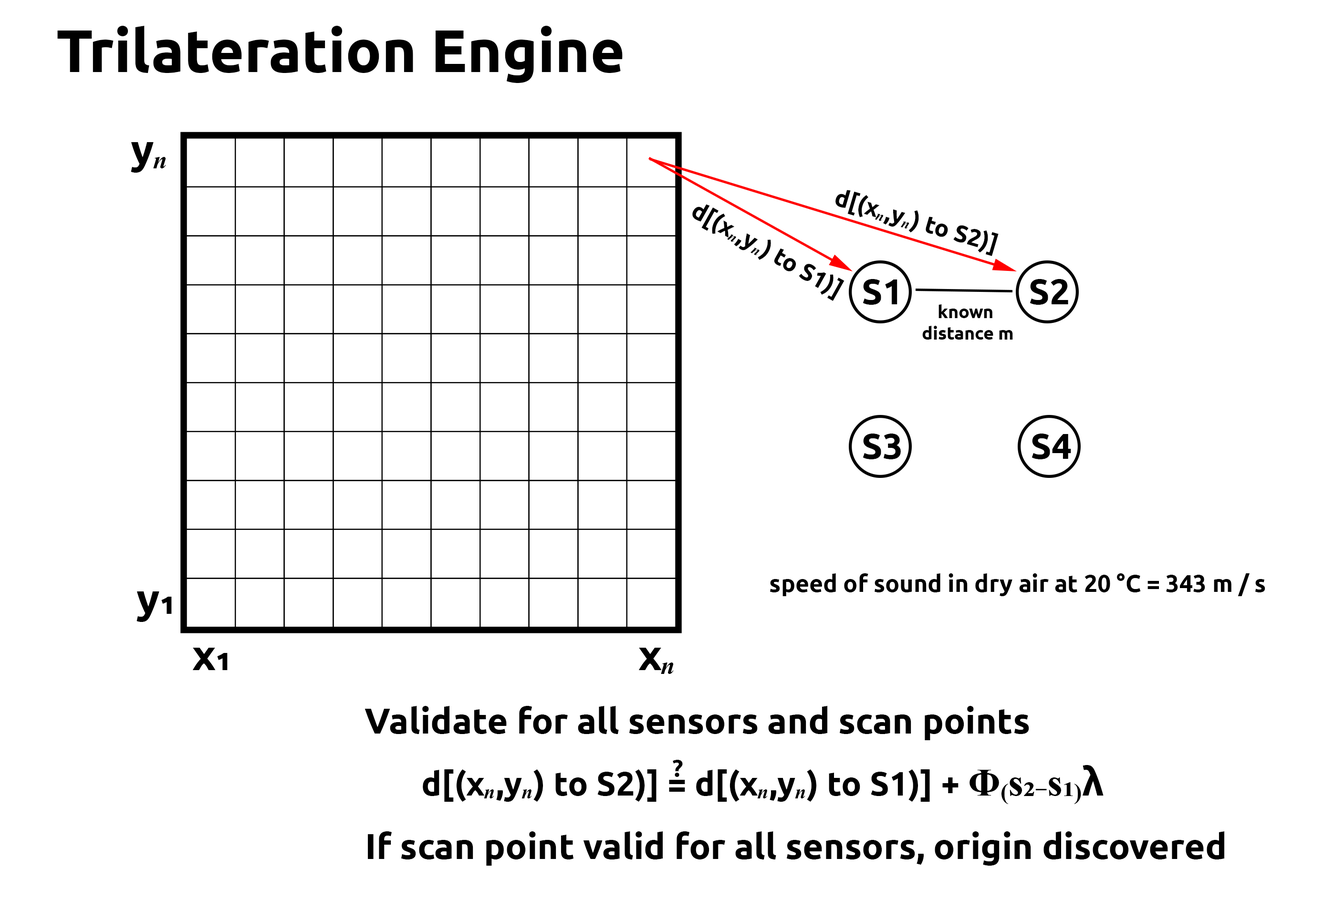
<style>
.page{position:relative;width:1324px;height:900px;background:#ffffff}
.page>*{position:absolute;margin:0}
.t1{font:59.6px "Ubuntu-Bold";color:#000000}
.t2{font:42.4px "Ubuntu-Bold";color:#000000}
.t3{font:42.4px "TimesNewRomanPS-BoldItalicMT";color:#000000}
.t4{font:23.9px "Ubuntu-Bold";color:#000000}
.t5{font:23.9px "TimesNewRomanPS-BoldItalicMT";color:#000000}
.t6{font:35.8px "Ubuntu-Bold";color:#000000}
.t7{font:17.9px "Ubuntu-Bold";color:#000000}
.t8{font:33.6px "Ubuntu-Bold";color:#000000}
.t9{font:33.6px "TimesNewRomanPS-BoldItalicMT";color:#000000}
.t10{font:39.2px "TimesNewRomanPS-BoldMT";color:#000000}
.t11{font:39.2px "Ubuntu-Bold";color:#000000}
</style>
<div class="page">
<p class="t1" style="left:57px;top:26px;width:566px;height:57px">Trilateration Engine</p>
<p class="t2" style="left:131px;top:142px;width:35px;height:31px">y<span class="t3">ₙ</span></p>
<p class="t4" style="left:836px;top:190px;width:163px;height:66px;rotate:16deg">d[(x<span class="t5">ₙ</span>,y<span class="t5">ₙ</span>) to S2)]</p>
<p class="t4" style="left:692px;top:204px;width:153px;height:97px;rotate:29deg">d[(x<span class="t5">ₙ</span>,y<span class="t5">ₙ</span>) to S1)]</p>
<p class="t6" style="left:863px;top:279px;width:35px;height:26px">S1</p>
<p class="t6" style="left:1030px;top:279px;width:38px;height:26px">S2</p>
<p class="t7" style="left:922px;top:304px;width:91px;height:36px;text-align:center">known <br>distance m</p>
<p class="t6" style="left:863px;top:434px;width:38px;height:26px">S3</p>
<p class="t6" style="left:1032px;top:434px;width:39px;height:26px">S4</p>
<p class="t4" style="left:770px;top:574px;width:496px;height:22px">speed of sound in dry air at 20 °C = 343 m / s</p>
<p class="t2" style="left:136px;top:592px;width:36px;height:30px">y₁</p>
<p class="t2" style="left:192px;top:648px;width:482px;height:26px">x₁                                        x<span class="t3">ₙ</span></p>
<p class="t6" style="left:365px;top:706px;width:664px;height:35px">Validate for all sensors and scan points</p>
<p class="t4" style="left:673px;top:760px;width:10px;height:17px">?</p>
<p class="t8" style="left:423px;top:765px;width:681px;height:40px">d[(x<span class="t9">ₙ</span>,y<span class="t9">ₙ</span>) to S2)] = d[(x<span class="t9">ₙ</span>,y<span class="t9">ₙ</span>) to S1)] + <span class="t10">Φ₍s₂₋s₁₎</span><span class="t11">λ</span></p>
<p class="t6" style="left:368px;top:832px;width:856px;height:34px"><span class="t4"><br></span>If scan point valid for all sensors, origin discovered</p>
</div>
